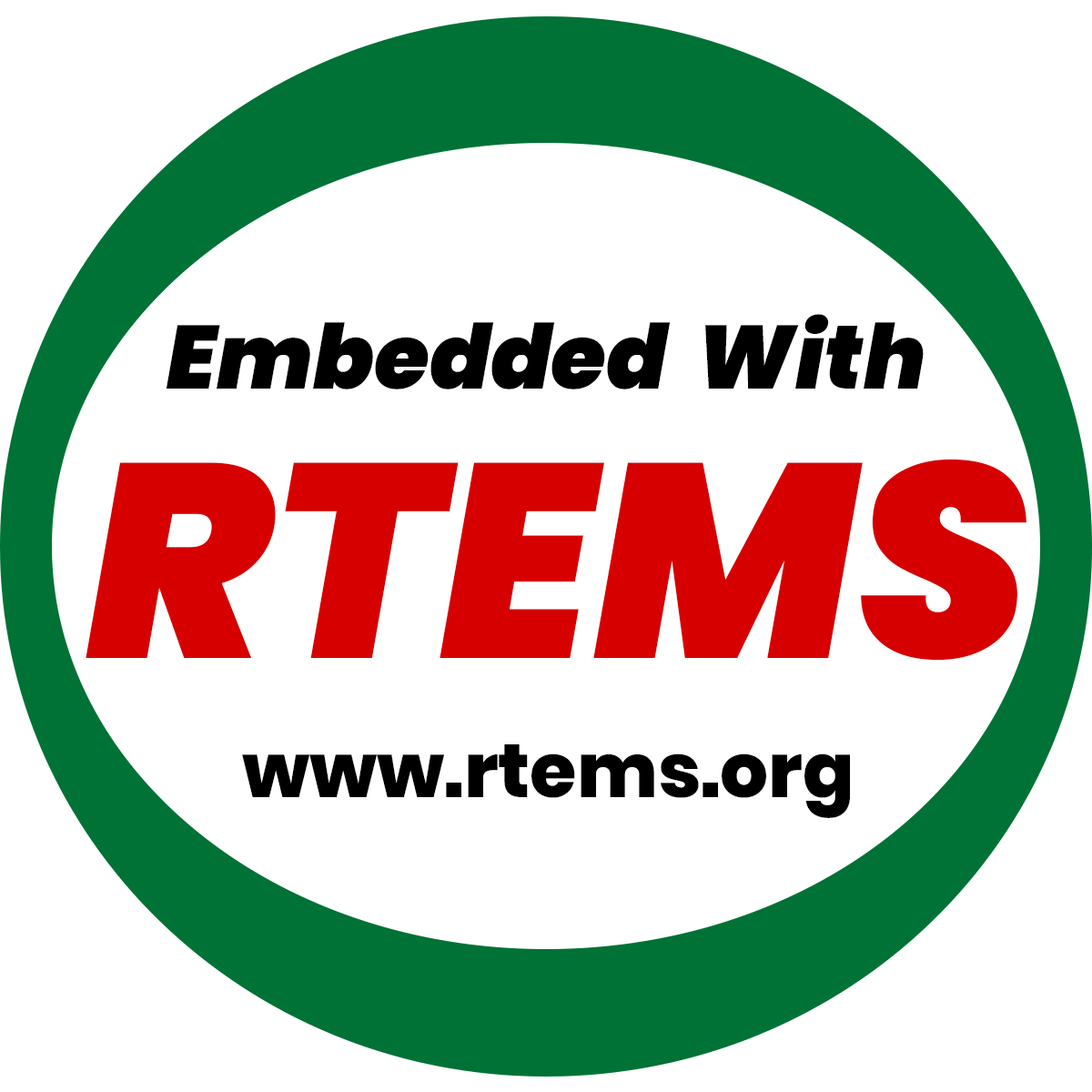
<style>
.page{position:relative;width:1092px;height:1092px;background:#ffffff}
.page>*{position:absolute;margin:0}
.t1{font:89.6px "Poppins-BlackItalic";color:#000000}
.t2{font:275.7px "Poppins-BlackItalic";color:#d60000}
.t3{font:75.8px "Poppins-ExtraBold";color:#000000}
</style>
<div class="page">
<p class="t1" style="left:166px;top:314px;width:758px;height:75px">Embedded  With</p>
<p class="t2" style="left:86px;top:459px;width:940px;height:202px">RTEMS</p>
<p class="t3" style="left:242px;top:744px;width:608px;height:74px">www.rtems.org</p>
</div>
